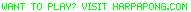
<style>
.page{position:relative;width:191px;height:12px;background:#ffffff}
.page>*{position:absolute;margin:0}
.t1{font:8.2px "pixelmix";color:#00ff00;scale:0.93 1}
</style>
<div class="page">
<p class="t1" style="left:2px;top:3px;width:185px;height:7px">WANT TO PLAY? VISIT HARPAPONG.COM</p>
</div>
